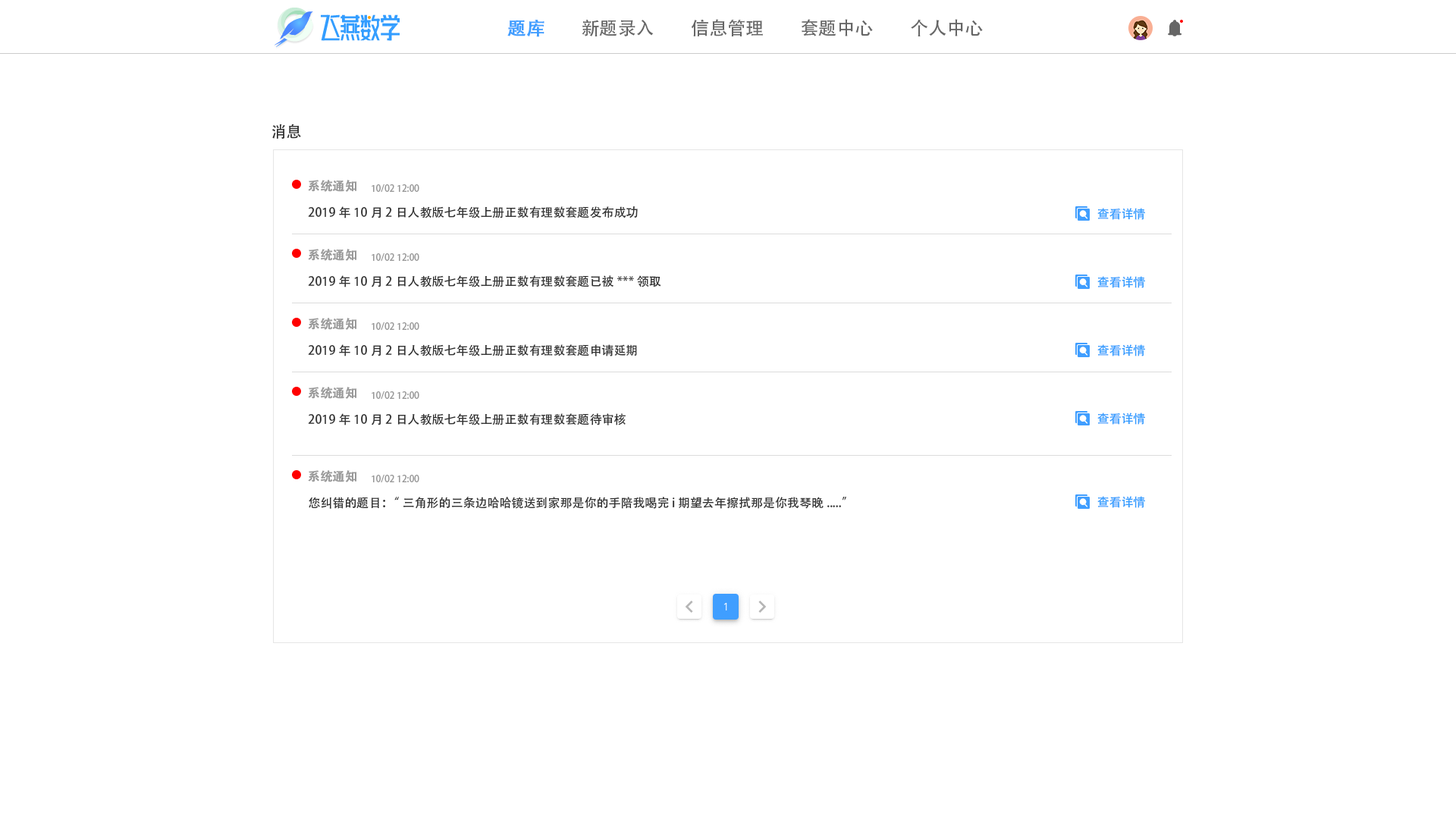
<style>
.page{position:relative;width:1456px;height:819px;background:#ffffff}
.page>*{position:absolute;margin:0}
.t1{font:18.2px "AdobeHeitiStd-Regular";color:#409eff;font-weight:bold}
.t2{font:18.2px "AdobeHeitiStd-Regular";color:#666666}
.t3{font:15.2px "AdobeHeitiStd-Regular";color:#333333}
.t4{font:12.1px "AdobeHeitiStd-Regular";color:#999999;font-weight:bold}
.t5{font:9.1px "AdobeHeitiStd-Regular";color:#999999}
.t6{font:12.1px "AdobeHeitiStd-Regular";color:#333333}
.t7{font:12.1px "AdobeHeitiStd-Regular";color:#339dff}
</style>
<div class="page">
<p class="t1" style="left:507px;top:20px;width:37px;height:17px">题库</p>
<p class="t2" style="left:582px;top:20px;width:72px;height:16px">新题录入</p>
<p class="t2" style="left:691px;top:19px;width:72px;height:18px">信息管理</p>
<p class="t2" style="left:802px;top:19px;width:71px;height:17px">套题中心</p>
<p class="t2" style="left:911px;top:19px;width:72px;height:17px">个人中心</p>
<p class="t3" style="left:272px;top:124px;width:29px;height:15px">消息</p>
<p class="t4" style="left:308px;top:180px;width:49px;height:12px">系统通知</p>
<p class="t5" style="left:372px;top:184px;width:47px;height:9px">10/02 12:00</p>
<p class="t6" style="left:308px;top:206px;width:330px;height:12px">2019年10月2日人教版七年级上册正数有理数套题发布成功</p>
<p class="t7" style="left:1097px;top:208px;width:48px;height:12px">查看详情</p>
<p class="t4" style="left:308px;top:249px;width:49px;height:12px">系统通知</p>
<p class="t5" style="left:372px;top:253px;width:47px;height:9px">10/02 12:00</p>
<p class="t6" style="left:308px;top:275px;width:353px;height:12px">2019年10月2日人教版七年级上册正数有理数套题已被***领取</p>
<p class="t7" style="left:1097px;top:276px;width:48px;height:12px">查看详情</p>
<p class="t4" style="left:308px;top:318px;width:49px;height:12px">系统通知</p>
<p class="t5" style="left:372px;top:322px;width:47px;height:9px">10/02 12:00</p>
<p class="t6" style="left:308px;top:344px;width:329px;height:12px">2019年10月2日人教版七年级上册正数有理数套题申请延期</p>
<p class="t7" style="left:1097px;top:344px;width:48px;height:12px">查看详情</p>
<p class="t4" style="left:308px;top:387px;width:49px;height:12px">系统通知</p>
<p class="t5" style="left:372px;top:391px;width:47px;height:9px">10/02 12:00</p>
<p class="t6" style="left:308px;top:413px;width:318px;height:12px">2019年10月2日人教版七年级上册正数有理数套题待审核</p>
<p class="t7" style="left:1097px;top:413px;width:48px;height:12px">查看详情</p>
<p class="t4" style="left:308px;top:470px;width:49px;height:12px">系统通知</p>
<p class="t5" style="left:372px;top:475px;width:47px;height:8px">10/02 12:00</p>
<p class="t6" style="left:309px;top:497px;width:537px;height:12px">您纠错的题目：“三角形的三条边哈哈镜送到家那是你的手陪我喝完 i 期望去年擦拭那是你我琴晚.....”</p>
<p class="t7" style="left:1097px;top:496px;width:48px;height:12px">查看详情</p>
</div>
